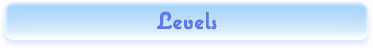
<style>
.page{position:relative;width:373px;height:48px}
.page>*{position:absolute;margin:0}
.t1{font:24px "CoquetteBold";color:#5e7aef}
</style>
<div class="page">
<p class="t1" style="left:157px;top:11px;width:60px;height:19px">Levels</p>
</div>
